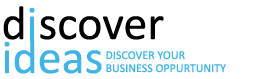
<style>
.page{position:relative;width:255px;height:79px;background:#ffffff}
.page>*{position:absolute;margin:0}
.t1{font:48px "Calibri";color:#000000}
.t2{font:48px "Calibri";color:#40b4e7}
.t3{font:12px/13px "Calibri";color:#40b4e7}
</style>
<div class="page">
<p class="t1" style="left:3px;top:6px;width:21px;height:34px">d</p>
<p class="t2" style="left:29px;top:7px;width:6px;height:33px">i</p>
<p class="t1" style="left:40px;top:16px;width:124px;height:24px">scover</p>
<p class="t2" style="left:4px;top:40px;width:98px;height:34px">ideas</p>
<p class="t3" style="left:106px;top:51px;width:120px;height:22px">DISCOVER YOUR<br>BUSINESS OPPURTUNITY</p>
</div>
